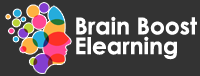
<style>
.page{position:relative;width:200px;height:76px;background:#333333}
.page>*{position:absolute;margin:0}
.t1{font:23.2px/19.9px "CenturyGothic-Bold";color:#ffffff}
</style>
<div class="page">
<p class="t1" style="left:76px;top:16px;width:121px;height:44px">Brain Boost<br>Elearning</p>
</div>
